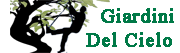
<style>
.page{position:relative;width:180px;height:53px;background:#ffffff}
.page>*{position:absolute;margin:0}
.t1{font:20px "TimesNewRomanPSMT";color:#007947;font-weight:bold}
.t2{font:14px "TimesNewRomanPSMT";color:#007947;font-weight:bold}
</style>
<div class="page">
<p class="t1" style="left:86px;top:8px;width:88px;height:39px;text-align:center"><span class="t2">             </span>    Giardini<br>            Del Cielo</p>
</div>
